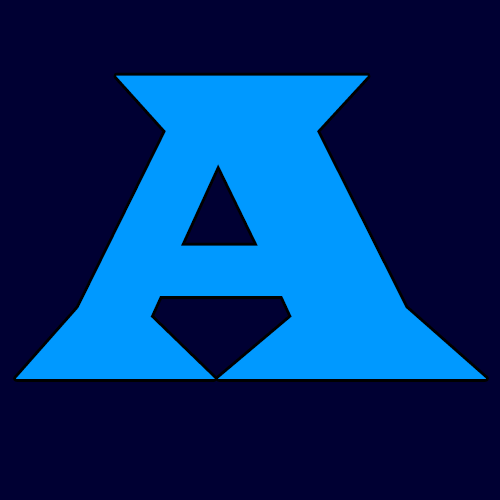
<style>
.page{position:relative;width:500px;height:500px;background:#000033}
.page>*{position:absolute;margin:0}
.t1{font:454.5px "LatinWide";color:#0099ff;scale:0.7 1}
</style>
<div class="page">
<p class="t1" style="left:16px;top:75px;width:470px;height:304px">A</p>
</div>
